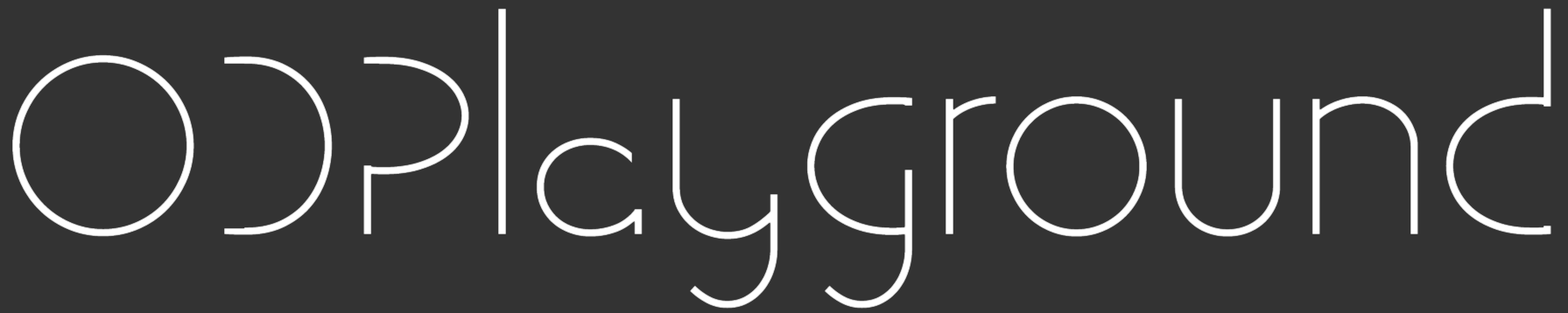
<style>
.page{position:relative;width:1568px;height:313px;background:#333333}
.page>*{position:absolute;margin:0}
.t1{font:253px "Existence-Light";color:#ffffff}
</style>
<div class="page">
<p class="t1" style="left:12px;top:8px;width:1539px;height:301px">ODPlayground</p>
</div>
